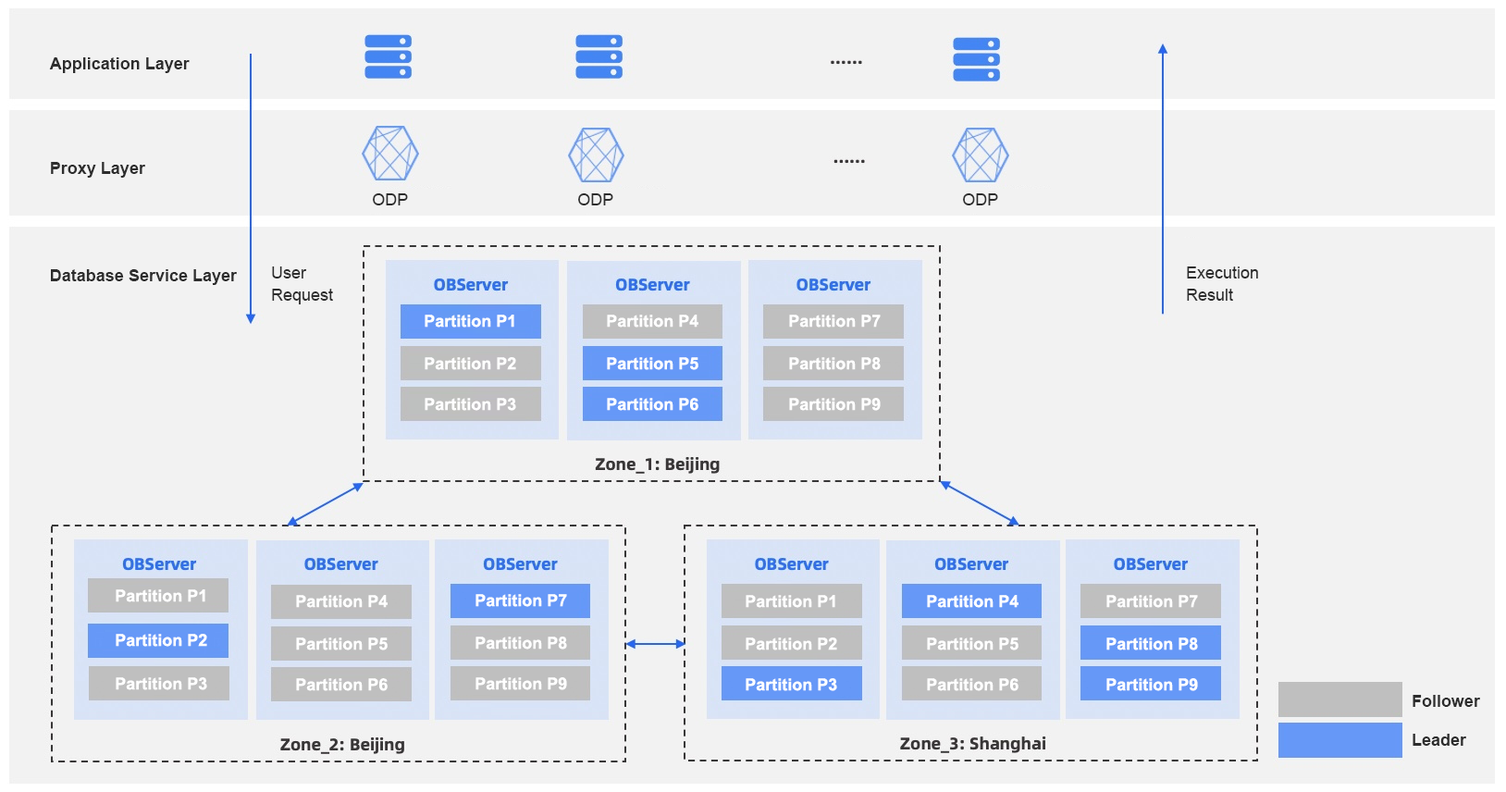
<style>
.page{position:relative;width:1506px;height:792px;background:#f2f2f2}
.page>*{position:absolute;margin:0}
.t1{font:16.7px "Arial-BoldMT";color:#2d2d2d}
.t2{font:16.7px "ArialMT";color:#2d2d2d}
.t3{font:16.7px/22.2px "ArialMT";color:#2d2d2d}
.t4{font:16.7px "Arial-BoldMT";color:#ffffff}
.t5{font:16.7px/38.9px "Arial-BoldMT";color:#2d2d2d}
</style>
<div class="page">
<p class="t1" style="left:49px;top:57px;width:141px;height:16px">Application Layer</p>
<p class="t1" style="left:51px;top:162px;width:94px;height:16px">Proxy Layer</p>
<p class="t2" style="left:373px;top:193px;width:35px;height:12px">ODP</p>
<p class="t2" style="left:578px;top:193px;width:35px;height:12px">ODP</p>
<p class="t2" style="left:963px;top:193px;width:35px;height:12px">ODP</p>
<p class="t1" style="left:51px;top:269px;width:186px;height:16px">Database Service Layer</p>
<p class="t3" style="left:272px;top:266px;width:61px;height:38px">User <br>Request</p>
<p class="t3" style="left:1187px;top:266px;width:71px;height:35px">Execution <br>Result</p>
<p class="t4" style="left:425px;top:315px;width:89px;height:12px">Partition P1</p>
<p class="t4" style="left:607px;top:315px;width:91px;height:12px">Partition P4</p>
<p class="t4" style="left:789px;top:315px;width:92px;height:12px">Partition P7</p>
<p class="t4" style="left:425px;top:357px;width:91px;height:13px">Partition P2</p>
<p class="t4" style="left:607px;top:357px;width:91px;height:13px">Partition P5</p>
<p class="t4" style="left:789px;top:357px;width:92px;height:13px">Partition P8</p>
<p class="t4" style="left:425px;top:398px;width:91px;height:13px">Partition P3</p>
<p class="t4" style="left:607px;top:398px;width:91px;height:13px">Partition P6</p>
<p class="t4" style="left:789px;top:398px;width:92px;height:13px">Partition P9</p>
<p class="t4" style="left:116px;top:589px;width:89px;height:13px">Partition P1</p>
<p class="t4" style="left:475px;top:594px;width:92px;height:13px">Partition P7</p>
<p class="t4" style="left:296px;top:595px;width:92px;height:13px">Partition P4</p>
<p class="t4" style="left:746px;top:595px;width:89px;height:13px">Partition P1</p>
<p class="t4" style="left:927px;top:595px;width:91px;height:13px">Partition P4</p>
<p class="t4" style="left:1106px;top:595px;width:92px;height:13px">Partition P7</p>
<p class="t4" style="left:116px;top:634px;width:91px;height:13px">Partition P2</p>
<p class="t4" style="left:296px;top:637px;width:92px;height:13px">Partition P5</p>
<p class="t4" style="left:475px;top:636px;width:92px;height:13px">Partition P8</p>
<p class="t4" style="left:746px;top:637px;width:91px;height:13px">Partition P2</p>
<p class="t4" style="left:927px;top:637px;width:91px;height:13px">Partition P5</p>
<p class="t4" style="left:1106px;top:637px;width:92px;height:13px">Partition P8</p>
<p class="t4" style="left:116px;top:677px;width:91px;height:13px">Partition P3</p>
<p class="t4" style="left:475px;top:677px;width:92px;height:13px">Partition P9</p>
<p class="t4" style="left:296px;top:678px;width:92px;height:13px">Partition P6</p>
<p class="t4" style="left:746px;top:678px;width:91px;height:13px">Partition P3</p>
<p class="t4" style="left:927px;top:678px;width:91px;height:13px">Partition P6</p>
<p class="t4" style="left:1106px;top:678px;width:92px;height:13px">Partition P9</p>
<p class="t5" style="left:1413px;top:695px;width:67px;height:51px">Follower<br>Leader</p>
</div>
